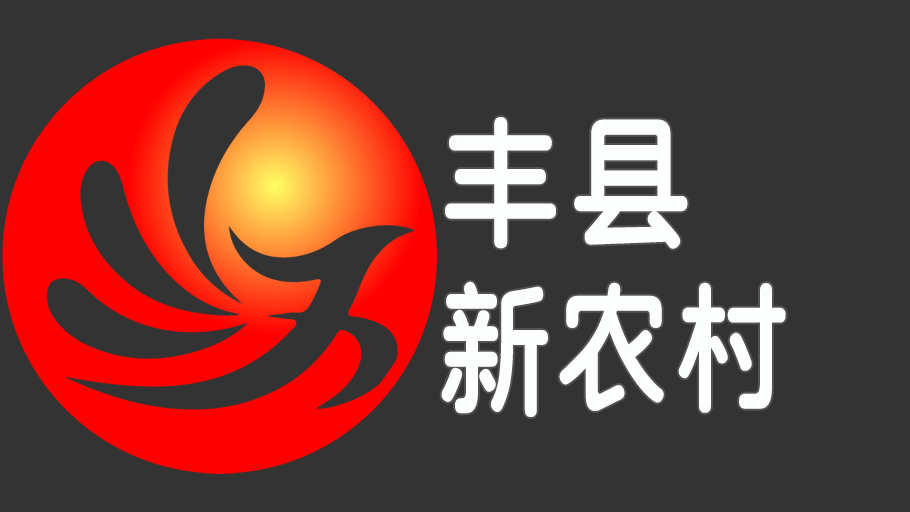
<style>
.page{position:relative;width:910px;height:512px;background:#333333}
.page>*{position:absolute;margin:0}
.t1{font:145.8px/166.7px "SJyuantijian-C-Regular";letter-spacing:0.02em;color:#fcfdfd;scale:0.8 1}
.t2{font:150px/166.7px "SJyuantijian-C-Regular";letter-spacing:0.02em;color:#fcfdfd;scale:0.85 1}
</style>
<div class="page">
<p class="t1" style="left:441px;top:117px;width:345px;height:300px"><span class="t2">丰县<br></span>新农村</p>
</div>
